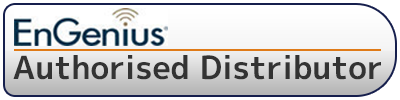
<style>
.page{position:relative;width:400px;height:100px}
.page>*{position:absolute;margin:0}
.t1{font:32px "mplus-1p-bold";color:#333333}
</style>
<div class="page">
<p class="t1" style="left:13px;top:55px;width:368px;height:25px">Authorised Distributor</p>
</div>
